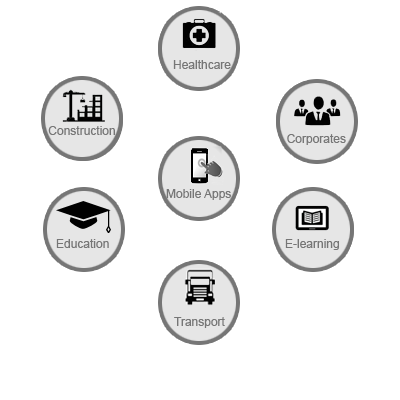
<style>
.page{position:relative;width:400px;height:400px;background:#ffffff}
.page>*{position:absolute;margin:0}
.t1{font:12px "ArialMT";color:#767676}
</style>
<div class="page">
<p class="t1" style="left:173px;top:60px;width:58px;height:9px">Healthcare</p>
<p class="t1" style="left:48px;top:126px;width:67px;height:9px">Construction</p>
<p class="t1" style="left:287px;top:134px;width:59px;height:11px">Corporates</p>
<p class="t1" style="left:166px;top:189px;width:65px;height:11px">Mobile Apps</p>
<p class="t1" style="left:56px;top:239px;width:53px;height:9px">Education</p>
<p class="t1" style="left:285px;top:239px;width:54px;height:11px">E-learning</p>
<p class="t1" style="left:174px;top:317px;width:51px;height:11px">Transport</p>
</div>
